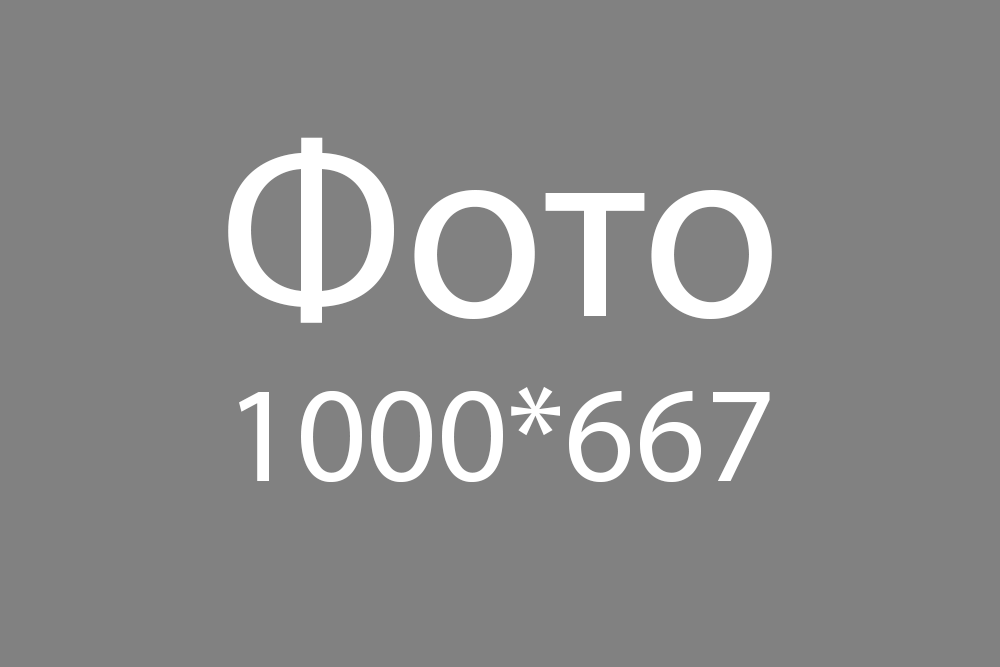
<style>
.page{position:relative;width:1000px;height:667px;background:#818181}
.page>*{position:absolute;margin:0}
.t1{font:137.5px "MyriadPro-Regular";color:#ffffff}
.t2{font:254.2px "MyriadPro-Regular";color:#ffffff}
</style>
<div class="page">
<p class="t1" style="left:228px;top:137px;width:544px;height:345px;text-align:center"><span class="t2">Фото<br></span>1000*667</p>
</div>
